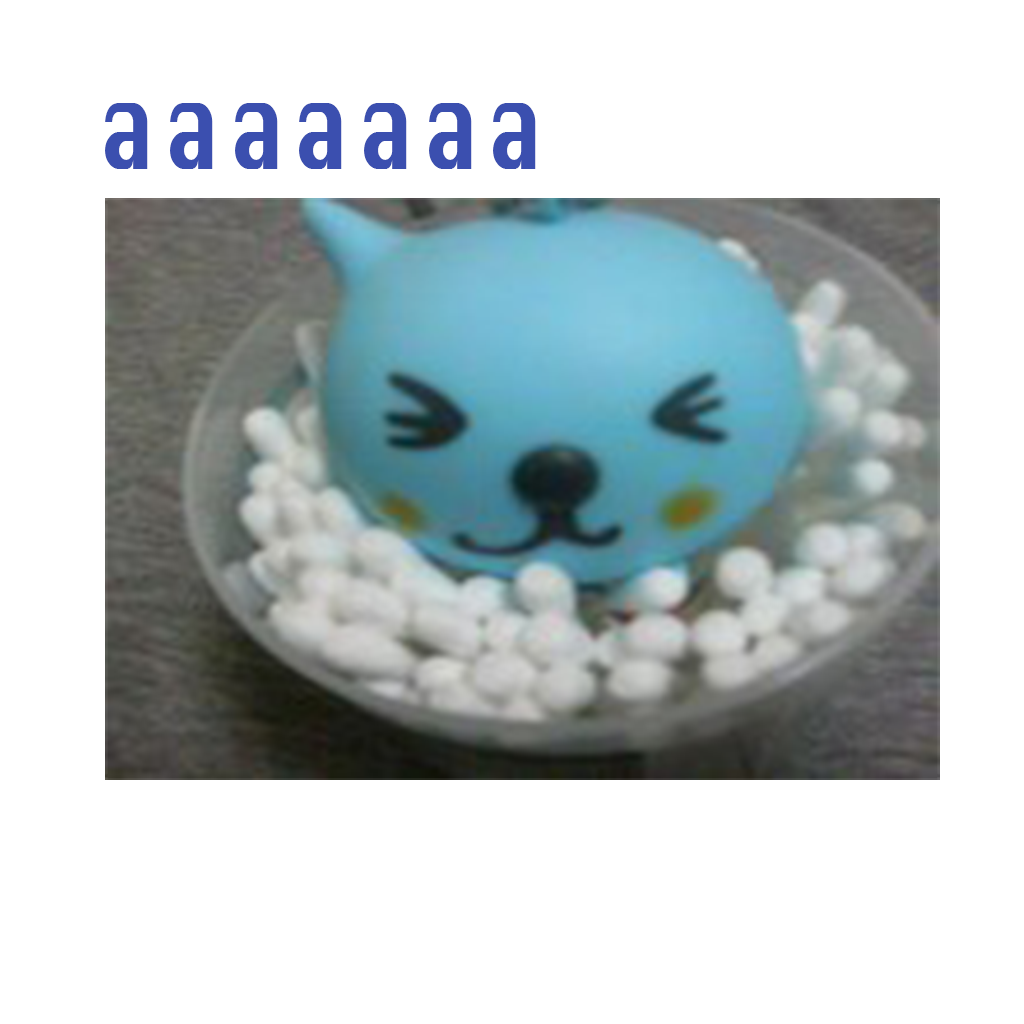
<style>
.page{position:relative;width:1024px;height:1024px;background:#ffffff}
.page>*{position:absolute;margin:0}
.t1{font:112.9px "Krungthep";letter-spacing:0.1em;color:#3b4faf;scale:0.75 1}
</style>
<div class="page">
<p class="t1" style="left:105px;top:103px;width:431px;height:66px">aaaaaaa</p>
</div>
